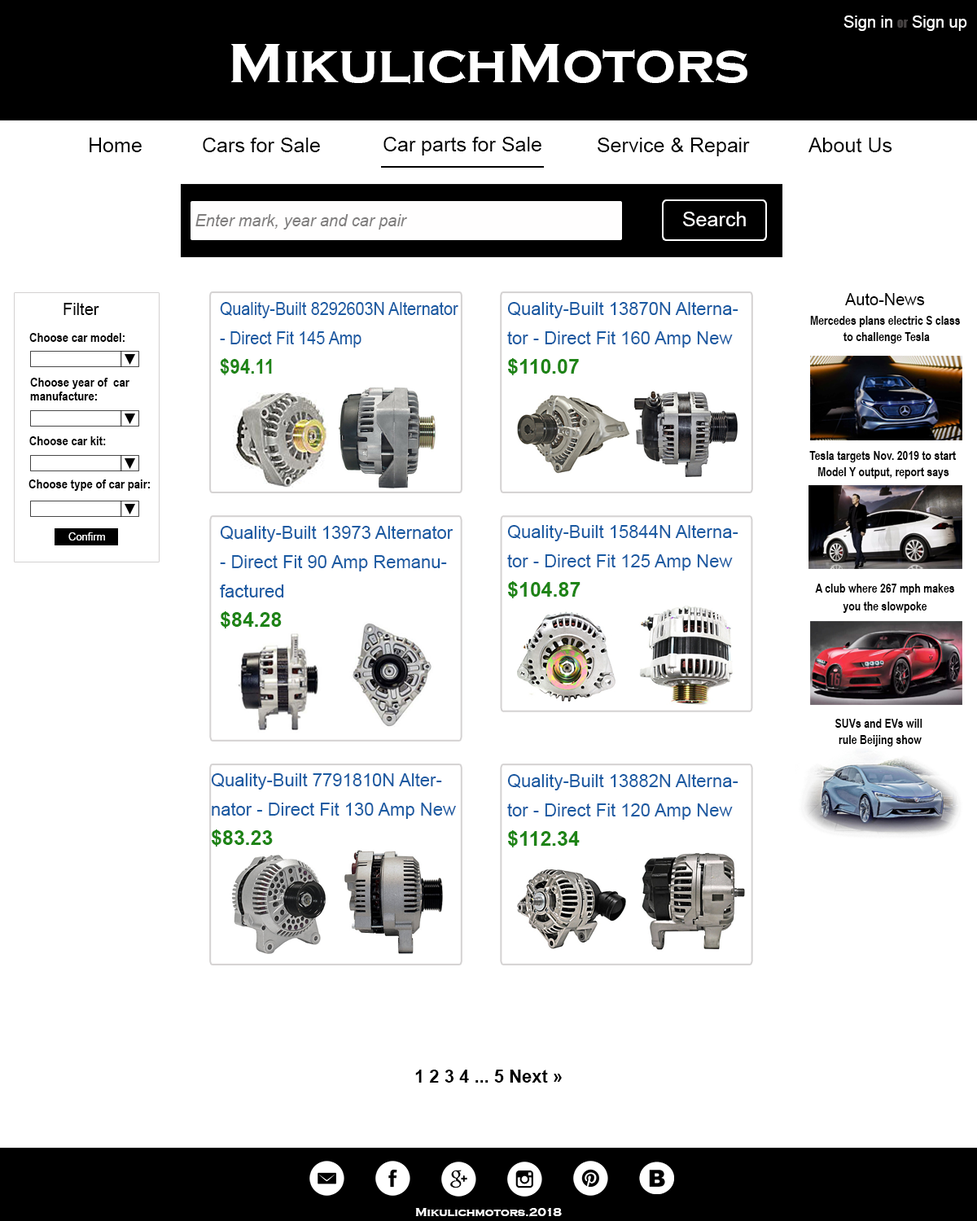
<style>
.page{position:relative;width:977px;height:1221px;background:#ffffff}
.page>*{position:absolute;margin:0}
.t1{font:16.3px "ArialMT";color:#ffffff}
.t2{font:12.2px "Impact";color:#464343}
.t3{font:57px "CopperplateGothic-Bold";color:#ffffff}
.t4{font:20.3px "ArialMT";color:#000000}
.t5{font:16.3px "Arial-ItalicMT";color:#807e7e}
.t6{font:20.3px "ArialMT";color:#fffefe}
.t7{font:16.3px "ArialMT";color:#000000}
.t8{font:17.9px/29.3px "ArialMT";color:#195aa2;scale:0.9 1}
.t9{font:20.3px/29.3px "Arial-BoldMT";color:#1e8416;scale:0.9 1}
.t10{font:17.9px/29.3px "ArialMT";color:#195aa2}
.t11{font:20.3px/29.3px "Arial-BoldMT";color:#1e8416}
.t12{font:12.2px/16.3px "ArialNarrow-Bold";color:#000000}
.t13{font:13px "ArialNarrow-Bold";color:#000000}
.t14{font:12.2px "ArialNarrow-Bold";color:#000000}
.t15{font:10.6px "ArialMT";color:#ffffff}
.t16{font:17.9px "Arial-BoldMT";color:#000000}
.t17{font:12.2px "CopperplateGothic-Bold";color:#ffffff}
</style>
<div class="page">
<p class="t1" style="left:843px;top:15px;width:49px;height:16px">Sign in</p>
<p class="t1" style="left:912px;top:15px;width:55px;height:16px">Sign up</p>
<p class="t2" style="left:897px;top:20px;width:11px;height:8px">or</p>
<p class="t3" style="left:231px;top:44px;width:516px;height:40px">MikulichMotors</p>
<p class="t4" style="left:90px;top:138px;width:52px;height:14px">Home</p>
<p class="t4" style="left:203px;top:138px;width:117px;height:14px">Cars for Sale</p>
<p class="t4" style="left:383px;top:137px;width:158px;height:18px">Car parts for Sale</p>
<p class="t4" style="left:597px;top:138px;width:153px;height:18px">Service &amp; Repair</p>
<p class="t4" style="left:808px;top:138px;width:84px;height:14px">About Us</p>
<p class="t5" style="left:195px;top:214px;width:212px;height:16px">Enter mark, year and car pair</p>
<p class="t6" style="left:683px;top:212px;width:63px;height:14px">Search</p>
<p class="t7" style="left:845px;top:293px;width:80px;height:12px">Auto-News</p>
<p class="t7" style="left:63px;top:303px;width:36px;height:12px">Filter</p>
<p class="t8" style="left:220px;top:302px;width:238px;height:73px">Quality-Built 8292603N Alternator - Direct Fit 145 Amp <br><span class="t9">$94.11</span></p>
<p class="t10" style="left:507px;top:302px;width:231px;height:73px">Quality-Built 13870N Alternator - Direct Fit 160 Amp New<br><span class="t11">$110.07</span></p>
<p class="t12" style="left:810px;top:316px;width:150px;height:27px;text-align:center">Mercedes plans electric S class <br>to challenge Tesla</p>
<p class="t13" style="left:29px;top:333px;width:96px;height:9px">Choose car model:</p>
<p class="t13" style="left:30px;top:378px;width:99px;height:11px">Choose year of  car</p>
<p class="t13" style="left:30px;top:391px;width:67px;height:9px">manufacture:</p>
<p class="t13" style="left:29px;top:436px;width:77px;height:9px">Choose car kit:</p>
<p class="t14" style="left:809px;top:451px;width:147px;height:11px">Tesla targets Nov. 2019 to start</p>
<p class="t14" style="left:818px;top:467px;width:131px;height:12px">Model Y output, report says</p>
<p class="t13" style="left:28px;top:479px;width:122px;height:12px">Choose type of car pair:</p>
<p class="t15" style="left:68px;top:532px;width:37px;height:8px">Confirm</p>
<p class="t10" style="left:220px;top:526px;width:233px;height:102px">Quality-Built 13973 Alternator - Direct Fit 90 Amp Remanufactured<br><span class="t11">$84.28</span></p>
<p class="t10" style="left:507px;top:525px;width:231px;height:73px">Quality-Built 15844N Alternator - Direct Fit 125 Amp New<br><span class="t11">$104.87</span></p>
<p class="t14" style="left:815px;top:584px;width:139px;height:11px">A club where 267 mph makes</p>
<p class="t14" style="left:842px;top:601px;width:85px;height:12px">you the slowpoke</p>
<p class="t12" style="left:835px;top:719px;width:87px;height:27px;text-align:center">SUVs and EVs will <br>rule Beijing show</p>
<p class="t10" style="left:211px;top:773px;width:245px;height:73px">Quality-Built 7791810N Alternator - Direct Fit 130 Amp New<br><span class="t11">$83.23</span></p>
<p class="t10" style="left:507px;top:774px;width:231px;height:73px">Quality-Built 13882N Alternator - Direct Fit 120 Amp New<br><span class="t11">$112.34</span></p>
<p class="t16" style="left:415px;top:1069px;width:147px;height:14px">1 2 3 4 ... 5 Next »</p>
<p class="t17" style="left:415px;top:1208px;width:147px;height:9px">Mikulichmotors.2018</p>
</div>
